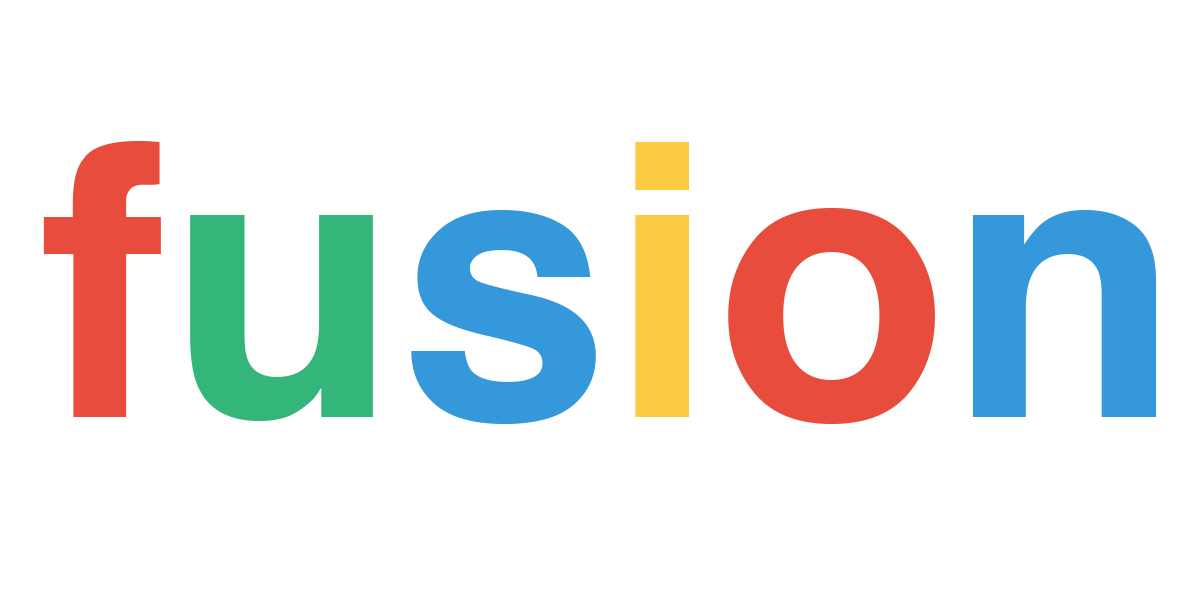
<style>
.page{position:relative;width:1200px;height:600px;background:#ffffff}
.page>*{position:absolute;margin:0}
.t1{font:380px "Helvetica-Bold";color:#e74c3c}
.t2{font:380px "Helvetica-Bold";color:#34b67a}
.t3{font:380px "Helvetica-Bold";color:#3498db}
.t4{font:380px "Helvetica-Bold";color:#fbcb43}
</style>
<div class="page">
<p class="t1" style="left:43px;top:141px;width:1114px;height:283px">f<span class="t2">u</span><span class="t3">s</span><span class="t4">i</span>o<span class="t3">n</span></p>
</div>
